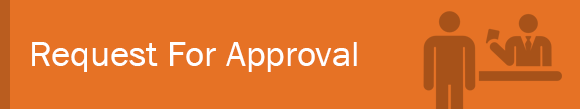
<style>
.page{position:relative;width:580px;height:109px;background:#e67225}
.page>*{position:absolute;margin:0}
.t1{font:36px "FranklinGothic-Book";color:#ffffff;scale:1.03 1}
</style>
<div class="page">
<p class="t1" style="left:32px;top:42px;width:325px;height:30px">Request For Approval</p>
</div>
